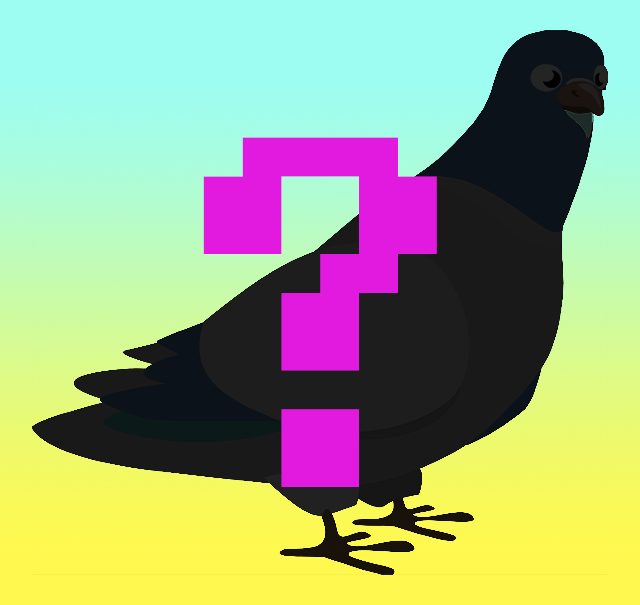
<style>
.page{position:relative;width:640px;height:605px}
.page>*{position:absolute;margin:0}
.t1{font:496.9px "Fixedsys";color:#e21ae0;text-transform:uppercase}
</style>
<div class="page">
<p class="t1" style="left:203px;top:137px;width:234px;height:350px">?</p>
</div>
